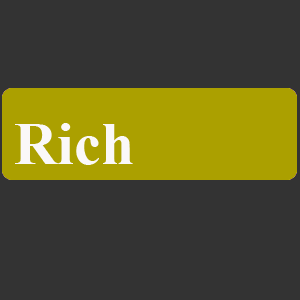
<style>
.page{position:relative;width:300px;height:300px;background:#333333}
.page>*{position:absolute;margin:0}
.t1{font:60px "TimesNewRomanPS-BoldMT";color:#faf8f8}
</style>
<div class="page">
<p class="t1" style="left:15px;top:123px;width:118px;height:42px">Rich</p>
</div>
